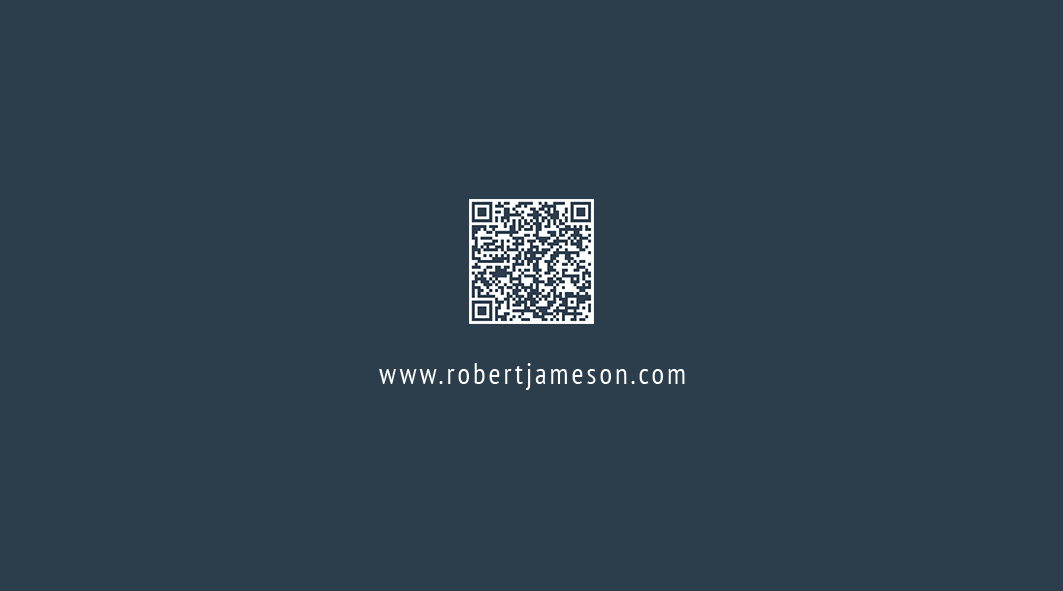
<style>
.page{position:relative;width:1063px;height:591px;background:#2c3d4b}
.page>*{position:absolute;margin:0}
.t1{font:29.2px "PTSans-Narrow";letter-spacing:0.1em;color:#ffffff}
</style>
<div class="page">
<p class="t1" style="left:379px;top:363px;width:306px;height:27px">www.robertjameson.com</p>
</div>
